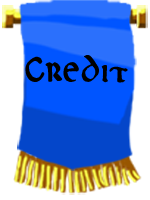
<style>
.page{position:relative;width:150px;height:200px;background:#ffffff}
.page>*{position:absolute;margin:0}
.t1{font:29.2px "DKNorthumbria";letter-spacing:0.05em;color:#000000}
</style>
<div class="page">
<p class="t1" style="left:25px;top:55px;width:103px;height:28px">Credit</p>
</div>
